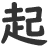
<style>
.page{position:relative;width:48px;height:48px;background:#ffffff}
.page>*{position:absolute;margin:0}
.t1{font:48px "UDDigiKyokashoN-B";color:#333333}
</style>
<div class="page">
<p class="t1" style="left:1px;top:2px;width:47px;height:44px">起</p>
</div>
